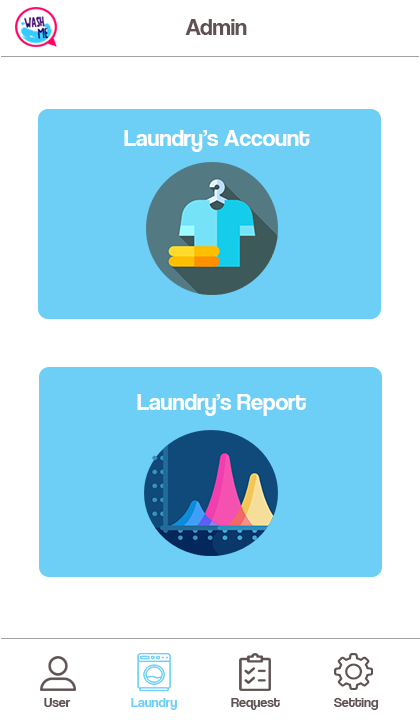
<style>
.page{position:relative;width:420px;height:720px;background:#ffffff}
.page>*{position:absolute;margin:0}
.t1{font:24px "CoolveticaRg-Regular";color:#605252}
.t2{font:24px "CoolveticaRg-Regular";color:#ffffff}
.t3{font:14px "CoolveticaRg-Regular";color:#605252}
.t4{font:14px "CoolveticaRg-Regular";color:#6dcff6}
</style>
<div class="page">
<p class="t1" style="left:185px;top:19px;width:62px;height:16px">Admin</p>
<p class="t1" style="left:185px;top:19px;width:62px;height:16px">Admin</p>
<p class="t2" style="left:124px;top:130px;width:186px;height:22px">Laundry’s Account</p>
<p class="t2" style="left:137px;top:394px;width:169px;height:22px">Laundry’s Report</p>
<p class="t3" style="left:44px;top:698px;width:27px;height:9px">User</p>
<p class="t4" style="left:131px;top:698px;width:46px;height:12px">Laundry</p>
<p class="t3" style="left:231px;top:698px;width:49px;height:12px">Request</p>
<p class="t3" style="left:334px;top:698px;width:45px;height:12px">Setting</p>
</div>
